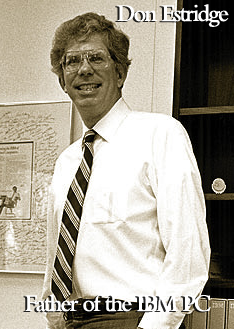
<style>
.page{position:relative;width:234px;height:329px}
.page>*{position:absolute;margin:0}
.t1{font:25px "BemboMT-SemiBold";letter-spacing:-0.08em;color:#ffffff;scale:0.95 1}
</style>
<div class="page">
<p class="t1" style="left:117px;top:4px;width:112px;height:23px">Don Estridge</p>
<p class="t1" style="left:25px;top:294px;width:186px;height:18px">Father of the IBM PC</p>
</div>
